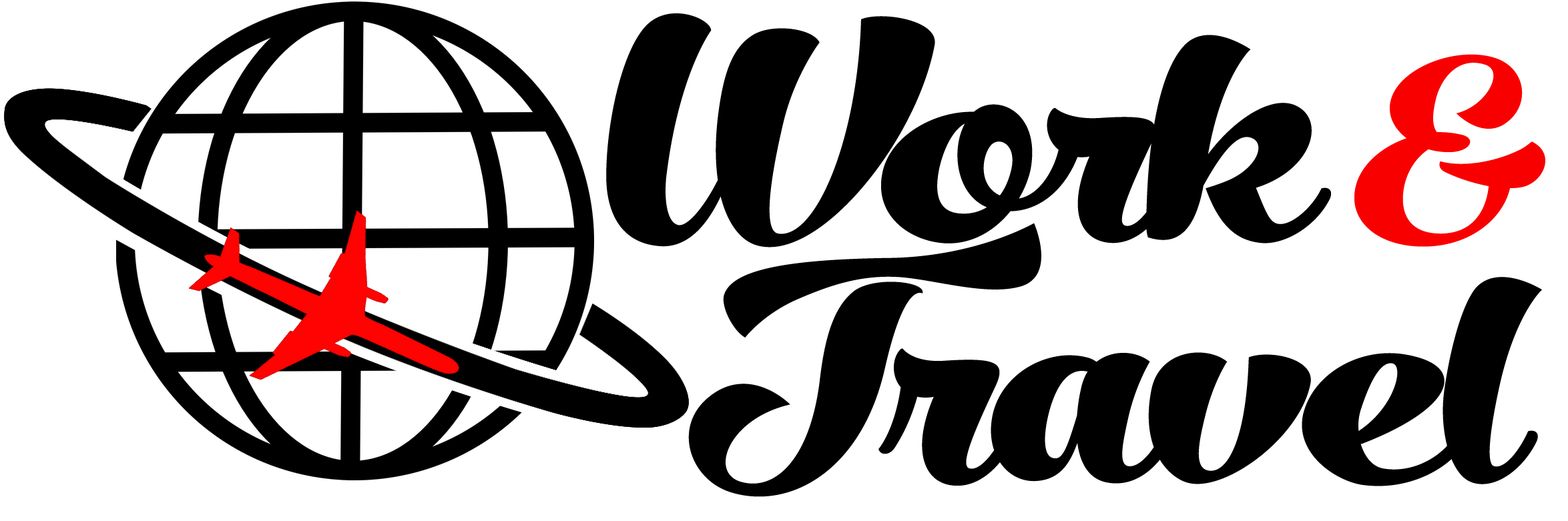
<style>
.page{position:relative;width:1568px;height:521px;background:#ffffff}
.page>*{position:absolute;margin:0}
.t1{font:278.1px "No.SevenBold";letter-spacing:-0.02em;color:#000000;scale:1.25 1}
.t2{font:222.5px "No.SevenBold";letter-spacing:-0.02em;color:#f90000;scale:1.25 1}
</style>
<div class="page">
<p class="t1" style="left:606px;top:13px;width:725px;height:235px">Work</p>
<p class="t2" style="left:1354px;top:54px;width:191px;height:193px">&amp;</p>
<p class="t1" style="left:688px;top:223px;width:854px;height:274px">Travel</p>
</div>
